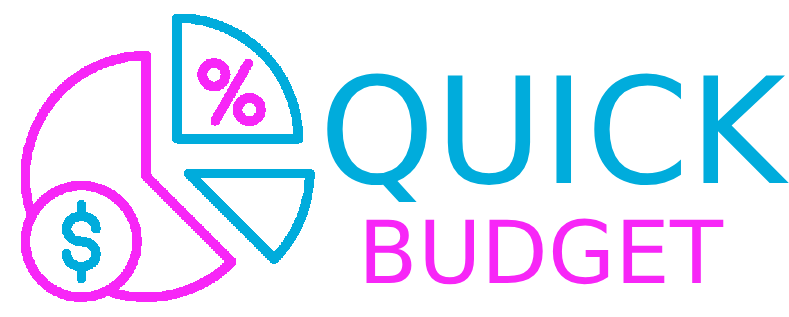
<style>
.page{position:relative;width:789px;height:317px;background:#ffffff}
.page>*{position:absolute;margin:0}
.t1{font:147.4px "Trondheim";color:#00acdc}
.t2{font:86.8px "Trondheim";color:#f726f7}
</style>
<div class="page">
<p class="t1" style="left:327px;top:73px;width:462px;height:129px">QUICK</p>
<p class="t2" style="left:366px;top:218px;width:358px;height:67px">BUDGET</p>
</div>
